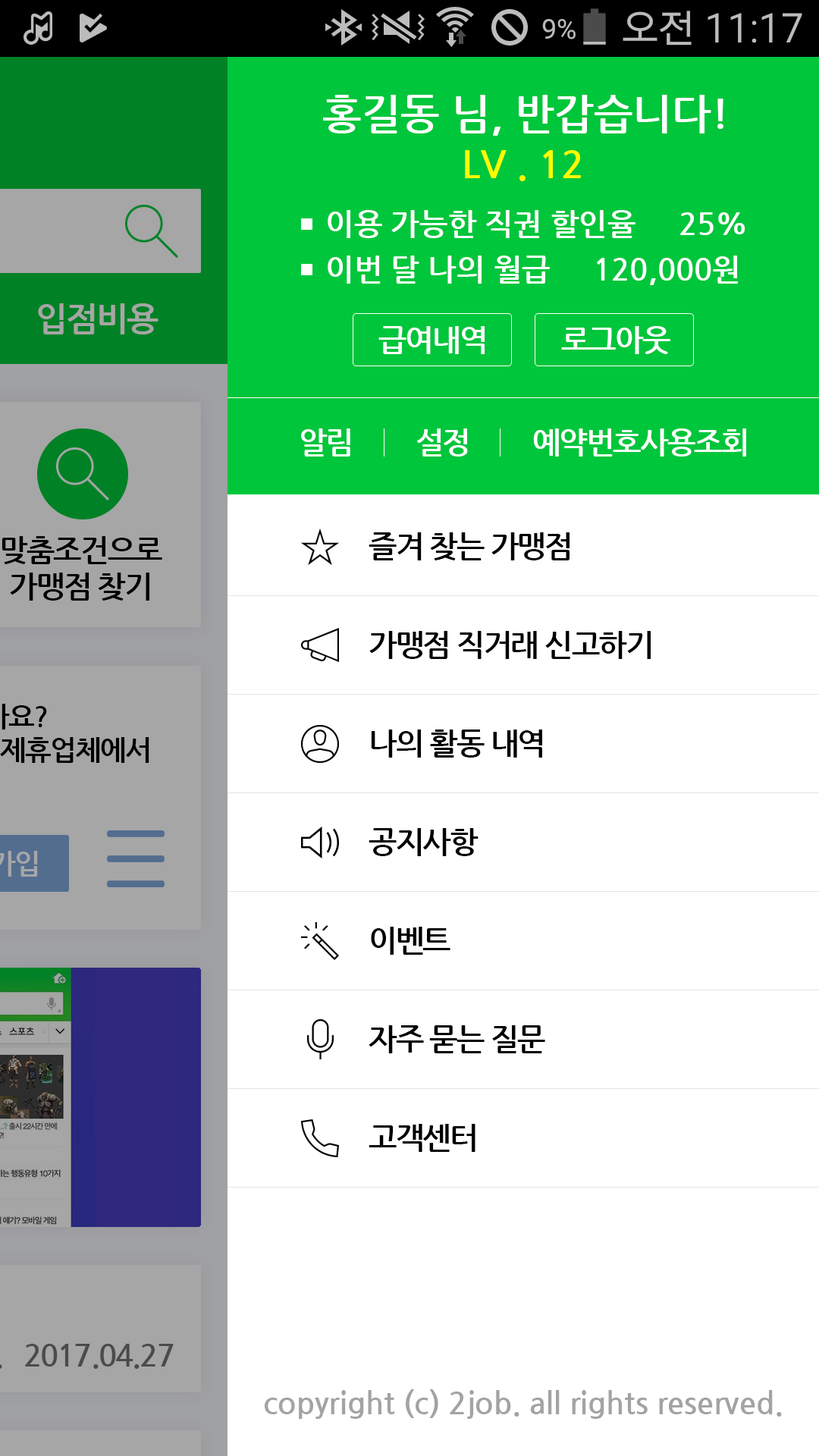
<style>
.page{position:relative;width:819px;height:1456px;background:#ffffff}
.page>*{position:absolute;margin:0}
.t1{font:41.7px "NanumGothicBold";color:#ffffff}
.t2{font:37.9px "NanumGothicBold";color:#fffc00}
.t3{font:30.3px/45.5px "NanumGothicBold";color:#ffffff}
.t4{font:30.3px "NanumGothicBold";letter-spacing:-0.05em;color:#ffffff}
.t5{font:30.3px/49.3px "NanumGothicBold";letter-spacing:-0.05em;color:#000000}
.t6{font:30.3px "NanumGothicBold";color:#a3a3a3}
</style>
<div class="page">
<p class="t1" style="left:323px;top:95px;width:400px;height:41px">홍길동 님, 반갑습니다!</p>
<p class="t2" style="left:465px;top:150px;width:116px;height:31px">LV . 12</p>
<p class="t3" style="left:328px;top:210px;width:417px;height:75px">이용 가능한 직권 할인율     25%<br>이번 달 나의 월급     120,000원</p>
<p class="t4" style="left:378px;top:326px;width:107px;height:28px">급여내역</p>
<p class="t4" style="left:561px;top:326px;width:109px;height:28px">로그아웃</p>
<p class="t4" style="left:301px;top:428px;width:445px;height:29px">알림         설정         예약번호사용조회</p>
<p class="t5" style="left:369px;top:532px;width:282px;height:620px">즐겨 찾는 가맹점<br><br>가맹점 직거래 신고하기<br><br>나의 활동 내역<br><br>공지사항<br><br>이벤트<br><br>자주 묻는 질문<br><br>고객센터</p>
<p class="t6" style="left:265px;top:1389px;width:517px;height:30px">copyright (c) 2job. all rights reserved.</p>
</div>
